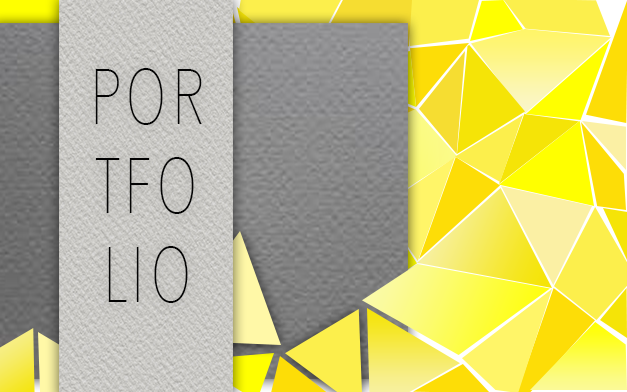
<style>
.page{position:relative;width:627px;height:392px}
.page>*{position:absolute;margin:0}
.t1{font:78.5px/88.9px "AvenirNextCondensed-UltraLight";letter-spacing:0.05em;color:#040404}
</style>
<div class="page">
<p class="t1" style="left:95px;top:68px;width:107px;height:235px;text-align:center">POR<br>TFO<br>LIO</p>
</div>
